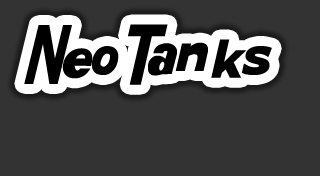
<style>
.page{position:relative;width:320px;height:176px;background:#333333}
.page>*{position:absolute;margin:0}
.t1{font:50px "KittyKatt";color:#000000}
</style>
<div class="page">
<p class="t1" style="left:24px;top:24px;width:248px;height:61px">Neo Tanks</p>
</div>
